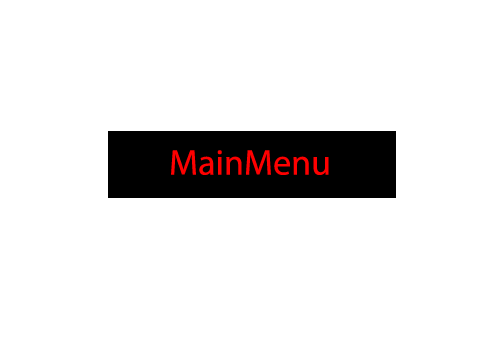
<style>
.page{position:relative;width:504px;height:360px;background:#ffffff}
.page>*{position:absolute;margin:0}
.t1{font:36px "MyriadPro-Regular";color:#fe0000}
</style>
<div class="page">
<p class="t1" style="left:171px;top:150px;width:158px;height:25px">MainMenu</p>
</div>
